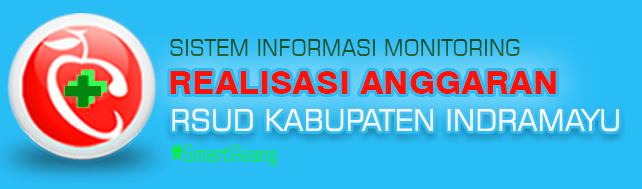
<style>
.page{position:relative;width:642px;height:189px;background:#29bdf6}
.page>*{position:absolute;margin:0}
.t1{font:24px "Square721BT-Roman";color:#1d5120;scale:0.88 1}
.t2{font:32px "Swiss721BT-Heavy";color:#f10900;scale:1.04 1}
.t3{font:30px "Square721BT-Roman";color:#f9f8f8;scale:0.97 1}
.t4{font:24px "Square721BT-RomanCondensed";color:#08f629;scale:0.88 1}
.t5{font:24px "ShowcardGothic-Reg";color:#08f629;scale:0.88 1}
</style>
<div class="page">
<p class="t1" style="left:170px;top:39px;width:350px;height:17px">SISTEM INFORMASI MONITORING</p>
<p class="t2" style="left:170px;top:71px;width:386px;height:23px">REALISASI ANGGARAN</p>
<p class="t3" style="left:172px;top:108px;width:447px;height:24px">RSUD KABUPATEN INDRAMAYU</p>
<p class="t4" style="left:171px;top:145px;width:106px;height:21px"><span class="t5">#</span>SmartReang</p>
</div>
